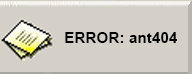
<style>
.page{position:relative;width:192px;height:74px;background:#d4d0c7}
.page>*{position:absolute;margin:0}
.t1{font:14.9px "Arial-BoldMT";color:#000000}
</style>
<div class="page">
<p class="t1" style="left:65px;top:32px;width:113px;height:11px">ERROR: ant404</p>
</div>
